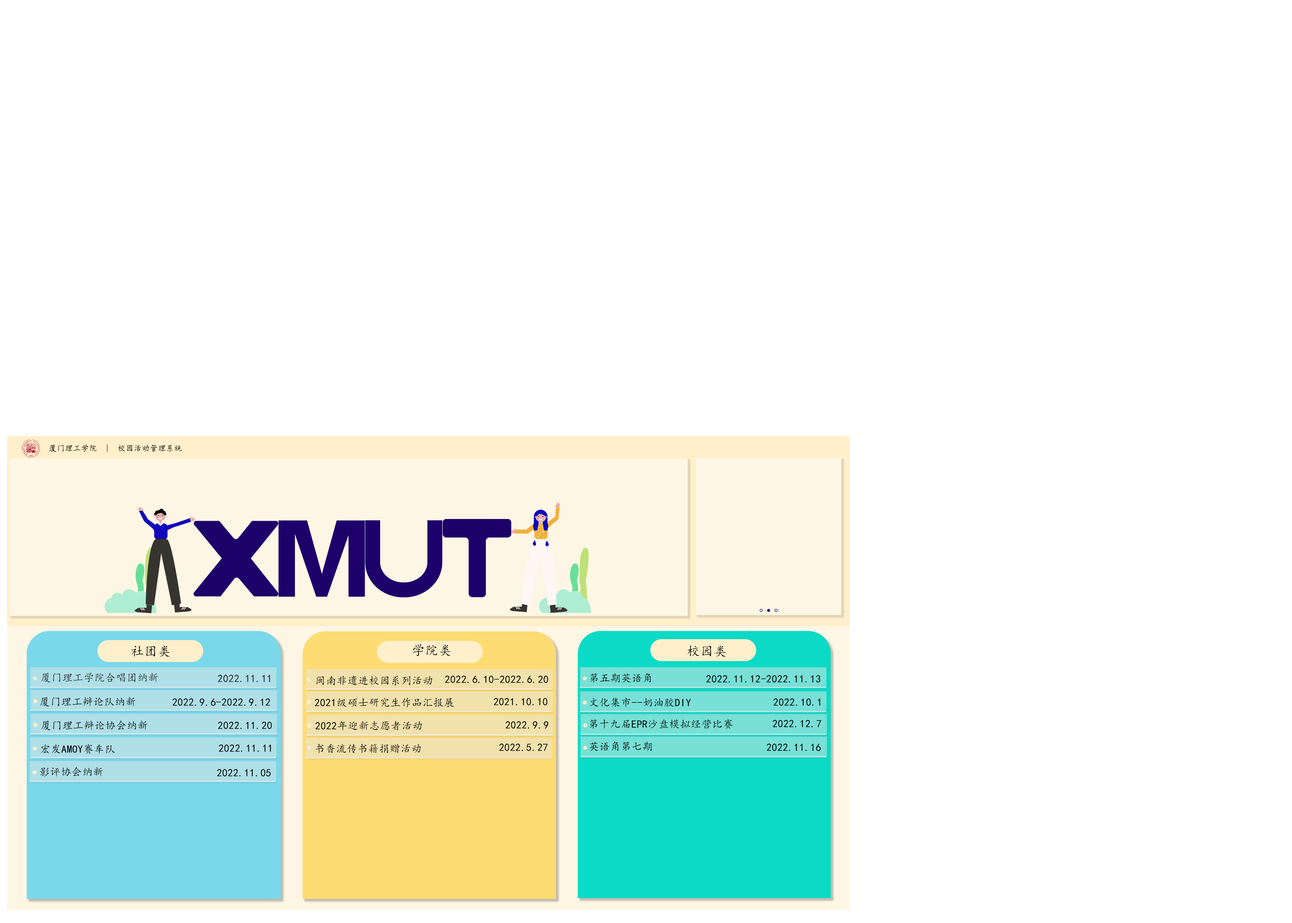
<style>
.page{position:relative;width:1292px;height:923px;background:#ffffff}
.page>*{position:absolute;margin:0}
.t1{font:7.9px "KaiTi";letter-spacing:0.02em;color:#020202}
.t2{font:7.9px "KaiTi";letter-spacing:0.02em;color:#000000}
.t3{font:7.9px "KaiTi";letter-spacing:0.02em;color:#626266}
.t4{font:13.2px "KaiTi";letter-spacing:0.02em;color:#000000}
.t5{font:10.5px "KaiTi";letter-spacing:0.02em;color:#282828}
.t6{font:10.5px "KaiTi";letter-spacing:0.02em;color:#000000}
.t7{font:10.5px "KaiTi";letter-spacing:0.02em;color:#030303}
.t8{font:10.5px "KaiTi";letter-spacing:0.02em;color:#010101}
</style>
<div class="page">
<p class="t1" style="left:49px;top:444px;width:133px;height:8px"><span class="t2">厦门理工学院</span><span class="t3">  |</span>  校园活动管理系统</p>
<p class="t4" style="left:131px;top:645px;width:39px;height:12px">社团类</p>
<p class="t4" style="left:413px;top:644px;width:38px;height:12px">学院类</p>
<p class="t4" style="left:687px;top:645px;width:39px;height:12px">校园类</p>
<p class="t5" style="left:41px;top:673px;width:117px;height:10px">厦门理工学院合唱团纳新</p>
<p class="t5" style="left:218px;top:675px;width:52px;height:7px">2022.11.11</p>
<p class="t6" style="left:316px;top:676px;width:116px;height:10px">闽南非遗进校园系列活动</p>
<p class="t6" style="left:445px;top:676px;width:103px;height:7px">2022.6.10-2022.6.20</p>
<p class="t6" style="left:590px;top:673px;width:61px;height:10px">第五期英语角</p>
<p class="t6" style="left:706px;top:675px;width:114px;height:8px">2022.11.12-2022.11.13</p>
<p class="t6" style="left:40px;top:697px;width:96px;height:10px">厦门理工辩论队纳新</p>
<p class="t7" style="left:172px;top:699px;width:98px;height:7px"><span class="t8"> </span>2022.9.6-2022.9.1<span class="t8">2</span></p>
<p class="t6" style="left:315px;top:698px;width:139px;height:10px">2021级硕士研究生作品汇报展</p>
<p class="t6" style="left:494px;top:698px;width:54px;height:8px">2021.10.10</p>
<p class="t6" style="left:589px;top:698px;width:102px;height:10px">文化集市--奶油胶DIY</p>
<p class="t6" style="left:773px;top:699px;width:47px;height:7px">2022.10.1</p>
<p class="t6" style="left:41px;top:720px;width:106px;height:11px">厦门理工辩论协会纳新</p>
<p class="t6" style="left:218px;top:722px;width:54px;height:7px">2022.11.20</p>
<p class="t6" style="left:315px;top:721px;width:107px;height:10px">2022年迎新志愿者活动</p>
<p class="t6" style="left:505px;top:721px;width:43px;height:8px"><span class="t2"> </span>2022.9.9</p>
<p class="t6" style="left:589px;top:719px;width:144px;height:10px">第十九届EPR沙盘模拟经营比赛</p>
<p class="t6" style="left:772px;top:720px;width:49px;height:7px">2022.12.7</p>
<p class="t6" style="left:41px;top:744px;width:74px;height:10px">宏发AMOY赛车队</p>
<p class="t6" style="left:219px;top:745px;width:52px;height:7px"><span class="t2"> </span>2022.11.11</p>
<p class="t6" style="left:315px;top:744px;width:106px;height:9px">书香流传书籍捐赠活动</p>
<p class="t6" style="left:499px;top:744px;width:49px;height:7px">2022.5.27</p>
<p class="t6" style="left:589px;top:742px;width:63px;height:10px">英语角第七期</p>
<p class="t6" style="left:767px;top:744px;width:53px;height:7px">2022.11.16</p>
<p class="t6" style="left:39px;top:767px;width:64px;height:10px">影评协会纳新</p>
<p class="t6" style="left:217px;top:769px;width:54px;height:8px"><span class="t2"> </span>2022.11.05</p>
</div>
